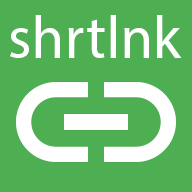
<style>
.page{position:relative;width:192px;height:192px;background:#4daf51}
.page>*{position:absolute;margin:0}
.t1{font:60px "MyriadPro-Regular";color:#ffffff}
</style>
<div class="page">
<p class="t1" style="left:10px;top:15px;width:172px;height:43px">shrtlnk</p>
</div>
